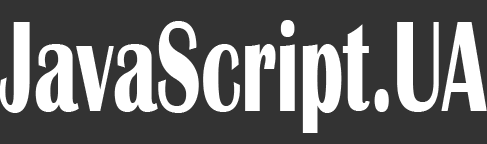
<style>
.page{position:relative;width:487px;height:144px;background:#333333}
.page>*{position:absolute;margin:0}
.t1{font:132.9px "BritannicBold";color:#ffffff;scale:0.61 1}
</style>
<div class="page">
<p class="t1" style="left:0px;top:20px;width:487px;height:113px">JavaScript.UA</p>
</div>
